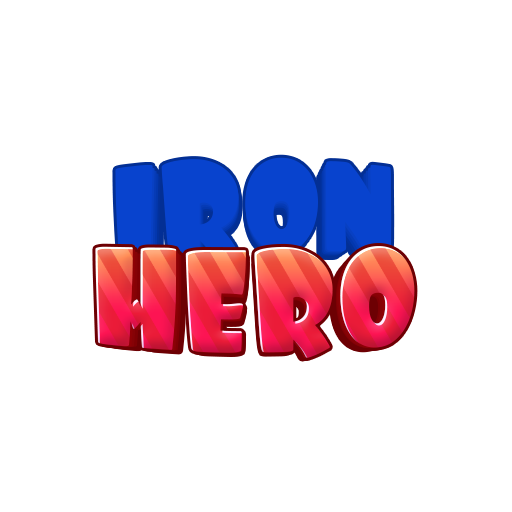
<style>
.page{position:relative;width:512px;height:512px;background:#ffffff}
.page>*{position:absolute;margin:0}
.t1{font:122.5px "Foo-Regular";letter-spacing:-0.01em;color:#0843ce}
.t2{font:120.1px "Foo-Regular";letter-spacing:-0.01em;color:#0840c3}
.t3{font:117.6px "Foo-Regular";letter-spacing:-0.01em;color:#063bb6}
.t4{font:115.3px "Foo-Regular";letter-spacing:-0.01em;color:#0843ce}
.t5{font:137.5px "Foo-Regular";letter-spacing:-0.005em;scale:0.91 1}
.t6{font:134.8px "Foo-Regular";letter-spacing:-0.005em;scale:0.91 1}
.t7{font:132.1px "Foo-Regular";letter-spacing:-0.005em;scale:0.91 1}
.t8{font:129.4px "Foo-Regular";letter-spacing:-0.005em;scale:0.91 1}
.t9{font:124.3px "Foo-Regular";letter-spacing:-0.005em;scale:0.91 1}
</style>
<div class="page">
<p class="t1" style="left:115px;top:157px;width:277px;height:100px">IRON</p>
<p class="t2" style="left:118px;top:160px;width:271px;height:98px">IRON</p>
<p class="t3" style="left:120px;top:163px;width:266px;height:96px">IRON</p>
<p class="t4" style="left:123px;top:166px;width:261px;height:94px">IRON</p>
<p class="t5" style="left:95px;top:246px;width:320px;height:112px">HERO</p>
<p class="t6" style="left:98px;top:248px;width:314px;height:110px">HERO</p>
<p class="t7" style="left:101px;top:250px;width:307px;height:108px">HERO</p>
<p class="t8" style="left:105px;top:252px;width:301px;height:106px">HERO</p>
<p class="t9" style="left:110px;top:257px;width:289px;height:102px">HERO</p>
</div>
